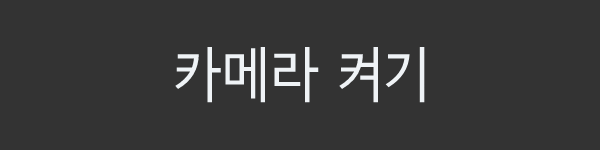
<style>
.page{position:relative;width:600px;height:150px;background:#333333}
.page>*{position:absolute;margin:0}
.t1{font:60px "SeN-CM";color:#eff3f6}
</style>
<div class="page">
<p class="t1" style="left:175px;top:46px;width:250px;height:57px">카메라 켜기</p>
</div>
